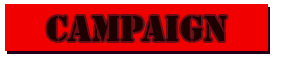
<style>
.page{position:relative;width:300px;height:60px;background:#f10000}
.page>*{position:absolute;margin:0}
.t1{font:33.3px "StencilStd";color:#1d0000}
</style>
<div class="page">
<p class="t1" style="left:47px;top:16px;width:180px;height:25px">Campaign</p>
</div>
